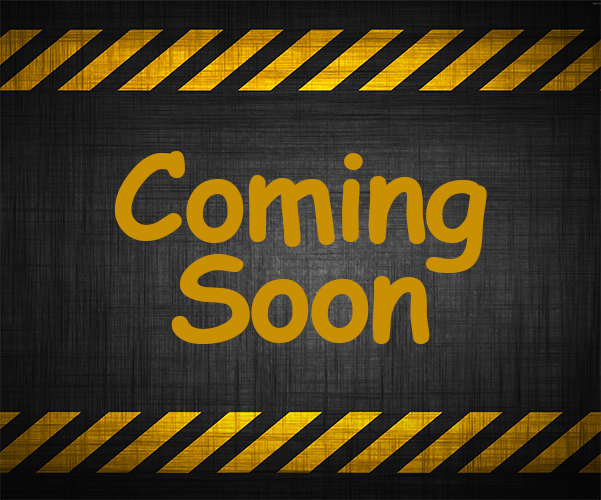
<style>
.page{position:relative;width:601px;height:500px}
.page>*{position:absolute;margin:0}
.t1{font:120.2px/100.2px "ComicSansMS-Bold";letter-spacing:-0.025em;color:#c89002}
</style>
<div class="page">
<p class="t1" style="left:114px;top:151px;width:373px;height:193px;text-align:center">Coming<br>Soon</p>
</div>
